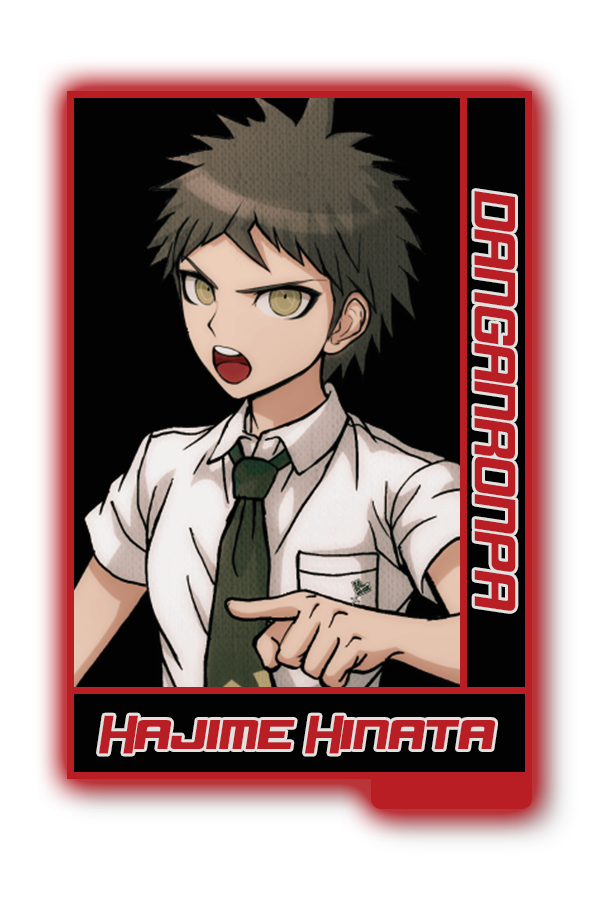
<style>
.page{position:relative;width:600px;height:900px;background:#020202}
.page>*{position:absolute;margin:0}
.t1{font:48.8px "DorBlue";color:#bb2c2e}
.t2{font:45.6px "DorBlue";color:#bb2c2e}
</style>
<div class="page">
<p class="t1" style="left:474px;top:191px;width:42px;height:420px;rotate:90deg">DANGANRONPA</p>
<p class="t2" style="left:99px;top:715px;width:396px;height:39px">Hajime Hinata</p>
</div>
